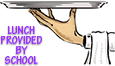
<style>
.page{position:relative;width:115px;height:66px;background:#ffffff}
.page>*{position:absolute;margin:0}
.t1{font:12px/10px "TektonPro-BoldCond";color:#9933ff}
</style>
<div class="page">
<p class="t1" style="left:0px;top:26px;width:42px;height:38px;text-align:center">LUNCH<br>PROVIDED<br>BY<br>SCHOOL</p>
</div>
